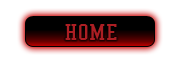
<style>
.page{position:relative;width:180px;height:65px;background:#ffffff}
.page>*{position:absolute;margin:0}
.t1{font:24px "CollegeSemiCondensed";letter-spacing:0.025em;color:#ac1e23;font-variant:small-caps}
</style>
<div class="page">
<p class="t1" style="left:65px;top:24px;width:52px;height:16px">HOME</p>
</div>
